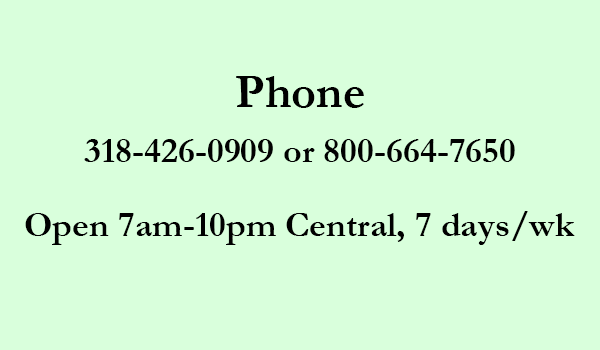
<style>
.page{position:relative;width:600px;height:350px;background:#d9ffdc}
.page>*{position:absolute;margin:0}
.t1{font:48px "Garamond-Bold";color:#000000}
.t2{font:36px "Garamond-Bold";color:#010101}
.t3{font:36px "Garamond-Bold";color:#000000}
</style>
<div class="page">
<p class="t1" style="left:236px;top:76px;width:128px;height:32px">Phone</p>
<p class="t2" style="left:84px;top:139px;width:431px;height:23px">318-426-0909 or 800-664-7650</p>
<p class="t3" style="left:25px;top:211px;width:550px;height:34px">Open 7am-10pm Central, 7 days/wk</p>
</div>
